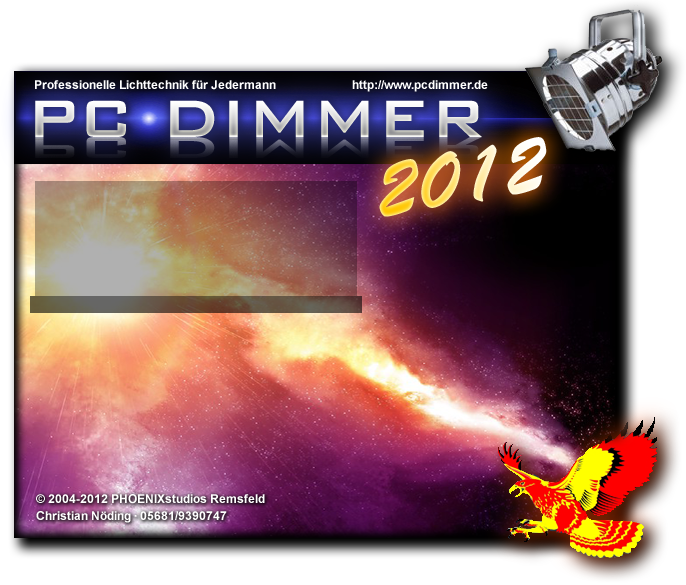
<style>
.page{position:relative;width:686px;height:585px}
.page>*{position:absolute;margin:0}
.t1{font:12px "Arial-BoldMT";color:#ffffff}
.t2{font:70px "BankGothicBT-Medium"}
.t3{font:80.4px "BrushScriptStd";scale:0.94 1}
</style>
<div class="page">
<p class="t1" style="left:35px;top:80px;width:241px;height:10px">Professionelle Lichttechnik für Jedermann</p>
<p class="t1" style="left:352px;top:80px;width:136px;height:12px">http://www.pcdimmer.de</p>
<p class="t2" style="left:35px;top:100px;width:447px;height:37px">PC DIMMER</p>
<p class="t3" style="left:379px;top:137px;width:168px;height:80px;rotate:-9deg">2012</p>
<p class="t1" style="left:36px;top:494px;width:229px;height:10px">© 2004-2012 PHOENIXstudios Remsfeld</p>
<p class="t1" style="left:36px;top:511px;width:191px;height:12px">Christian Nöding · 05681/9390747</p>
</div>
